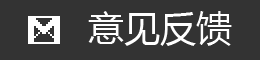
<style>
.page{position:relative;width:260px;height:60px;background:#333333}
.page>*{position:absolute;margin:0}
.t1{font:36px "MicrosoftYaHei";color:#ffffff}
</style>
<div class="page">
<p class="t1" style="left:88px;top:11px;width:144px;height:35px">意见反馈</p>
</div>
